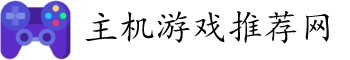
<style>
.page{position:relative;width:350px;height:60px;background:#ffffff}
.page>*{position:absolute;margin:0}
.t1{font:36px "KaiTi";color:#040404}
</style>
<div class="page">
<p class="t1" style="left:85px;top:11px;width:244px;height:33px">主机游戏推荐网</p>
</div>
